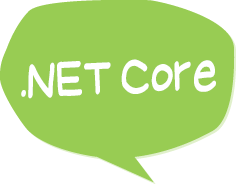
<style>
.page{position:relative;width:236px;height:184px;background:#98cc53}
.page>*{position:absolute;margin:0}
.t1{font:54px "SuplexmentaryComicNC";color:#ffffff;scale:0.8 1}
</style>
<div class="page">
<p class="t1" style="left:21px;top:59px;width:195px;height:40px;rotate:-3deg">.NET Core</p>
</div>
